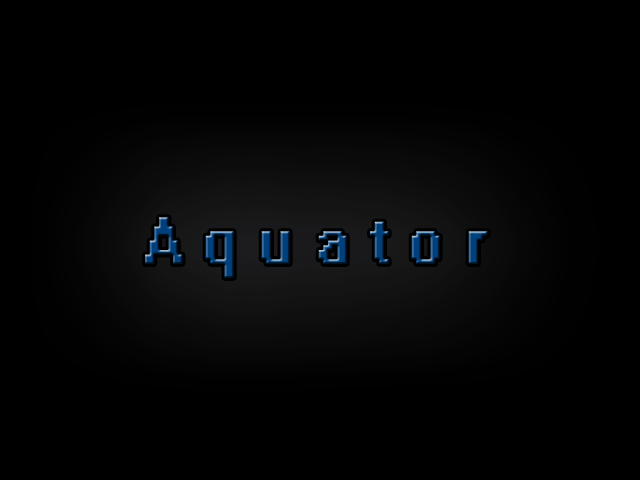
<style>
.page{position:relative;width:640px;height:480px;background:#000000}
.page>*{position:absolute;margin:0}
.t1{font:60px "System"}
</style>
<div class="page">
<p class="t1" style="left:145px;top:217px;width:343px;height:61px">A q u a t o r</p>
</div>
